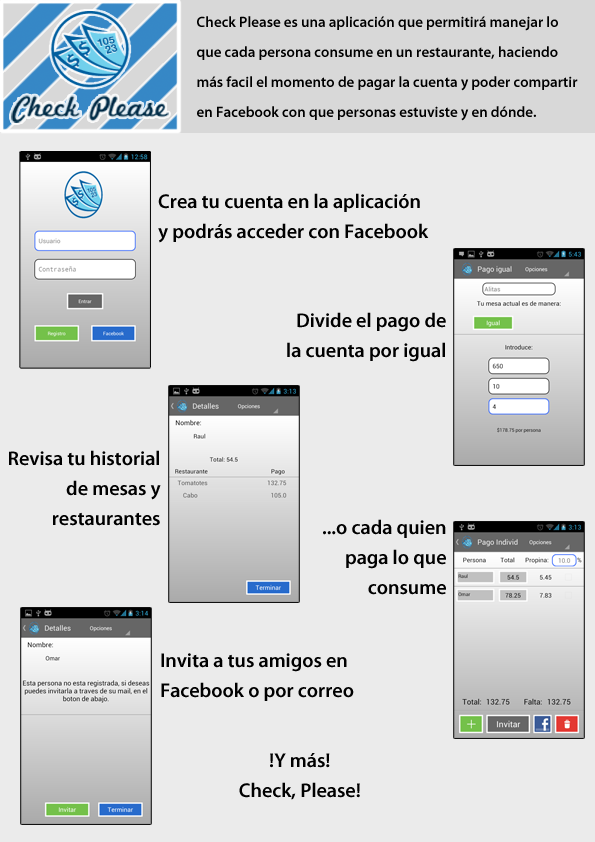
<style>
.page{position:relative;width:595px;height:842px;background:#ebebeb}
.page>*{position:absolute;margin:0}
.t1{font:15px/30px "MyriadPro-Semibold";color:#000000}
.t2{font:20px/30px "MyriadPro-Semibold";color:#000000}
</style>
<div class="page">
<p class="t1" style="left:197px;top:16px;width:381px;height:105px">Check Please es una aplicación que permitirá manejar lo<br>que cada persona consume en un restaurante, haciendo<br>más facil el momento de pagar la cuenta y poder compartir<br>en Facebook con que personas estuviste y en dónde.</p>
<p class="t2" style="left:158px;top:193px;width:271px;height:50px">Crea tu cuenta en la aplicación<br>y podrás acceder con Facebook</p>
<p class="t2" style="left:287px;top:312px;width:159px;height:50px;text-align:right">Divide el pago de<br>la cuenta por igual</p>
<p class="t2" style="left:9px;top:450px;width:152px;height:76px;text-align:right">Revisa tu historial<br>de mesas y<br>restaurantes</p>
<p class="t2" style="left:323px;top:519px;width:123px;height:76px;text-align:right">...o cada quien<br>paga lo que<br>consume</p>
<p class="t2" style="left:161px;top:653px;width:193px;height:48px">Invita a tus amigos en<br>Facebook o por correo</p>
<p class="t2" style="left:239px;top:753px;width:121px;height:47px;text-align:center">!Y más!<br>Check, Please!</p>
</div>
